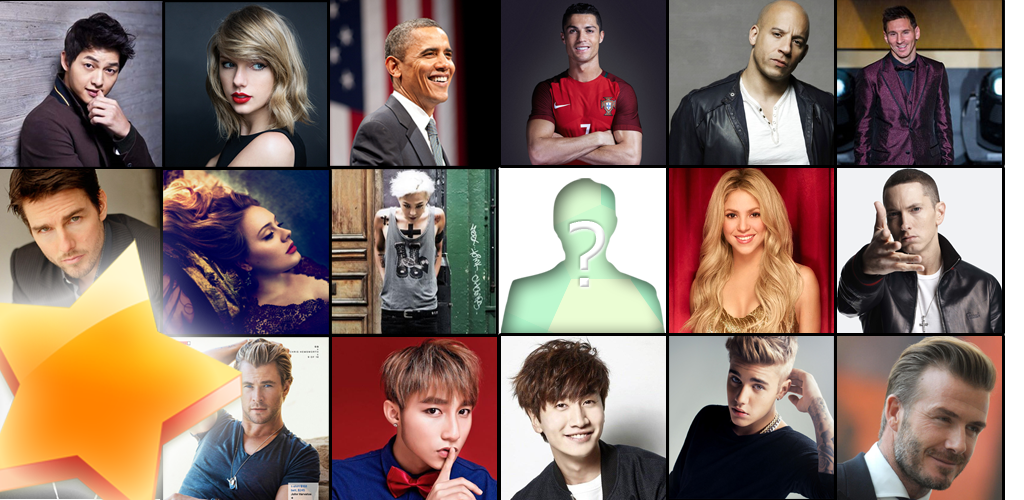
<style>
.page{position:relative;width:1024px;height:500px}
.page>*{position:absolute;margin:0}
.t1{font:90.4px "Tahoma";color:#ffffff}
</style>
<div class="page">
<p class="t1" style="left:569px;top:221px;width:36px;height:66px">?</p>
</div>
